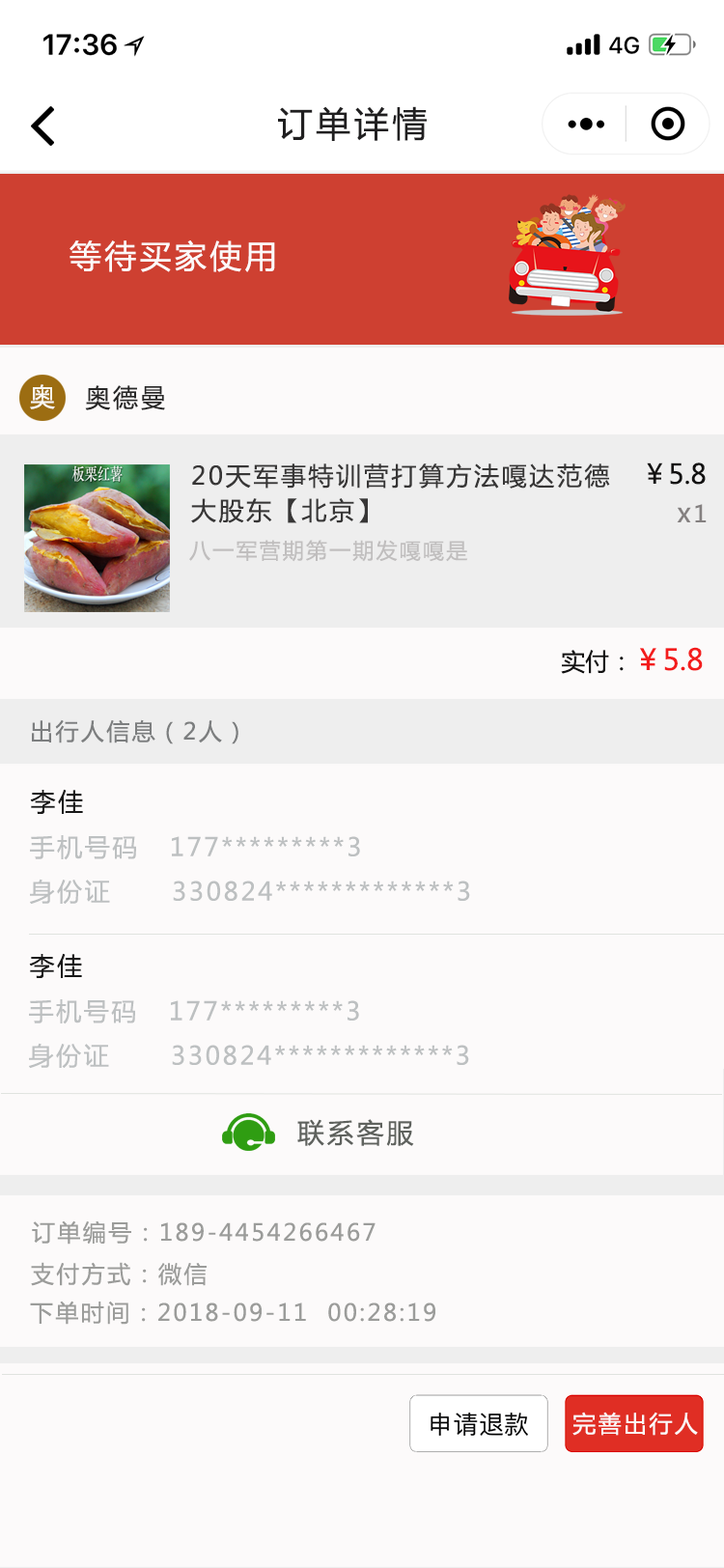
<style>
.page{position:relative;width:724px;height:1568px;background:#fcfafa}
.page>*{position:absolute;margin:0}
.t1{font:34.8px "MicrosoftYaHei";letter-spacing:0.1em;color:#201f20}
.t2{font:31.9px "MicrosoftYaHei";letter-spacing:0.1em;color:#fcf9f9}
.t3{font:25.1px "MicrosoftYaHei";letter-spacing:0.1em;color:#f9f7f2}
.t4{font:25.1px "MicrosoftYaHei";letter-spacing:0.1em;color:#282727}
.t5{font:25.1px/34.8px "MicrosoftYaHei";letter-spacing:0.1em;color:#373636}
.t6{font:27px "MicrosoftYaHei";color:#121111}
.t7{font:27px "MicrosoftYaHei";letter-spacing:0.1em;color:#848080}
.t8{font:23.2px "MicrosoftYaHei";letter-spacing:0.1em;color:#848080}
.t9{font:21.2px "MicrosoftYaHei";letter-spacing:0.1em;color:#c0bebe}
.t10{font:29px "MicrosoftYaHei";color:#f31c1c}
.t11{font:24.1px "MicrosoftYaHei";color:#121111}
.t12{font:23.2px "MicrosoftYaHei";letter-spacing:0.1em;color:#7c7e7f}
.t13{font:25.1px "MicrosoftYaHei";letter-spacing:0.1em;color:#181818}
.t14{font:25.1px "MicrosoftYaHei";letter-spacing:0.1em;color:#bdc0c1}
.t15{font:27px "MicrosoftYaHei";letter-spacing:0.1em;color:#5f625e}
.t16{font:23.2px "MicrosoftYaHei";letter-spacing:0.1em;color:#9b9c9a}
</style>
<div class="page">
<p class="t1" style="left:278px;top:106px;width:149px;height:35px">订单详情</p>
<p class="t2" style="left:70px;top:240px;width:205px;height:32px">等待买家使用</p>
<p class="t3" style="left:30px;top:384px;width:25px;height:25px">奥</p>
<p class="t4" style="left:85px;top:385px;width:80px;height:25px">奥德曼</p>
<p class="t5" style="left:191px;top:463px;width:419px;height:60px">20天军事特训营打算方法嘎达范德<br>大股东【北京】</p>
<p class="t6" style="left:647px;top:462px;width:59px;height:23px">￥5.8</p>
<p class="t7" style="left:677px;top:504px;width:30px;height:18px">x<span class="t8">1</span></p>
<p class="t9" style="left:189px;top:540px;width:279px;height:22px">八一军营期第一期发嘎嘎是</p>
<p class="t10" style="left:561px;top:647px;width:142px;height:27px"><span class="t11">实付：</span>￥5.8</p>
<p class="t12" style="left:32px;top:719px;width:206px;height:25px">出行人信息（2人）</p>
<p class="t13" style="left:30px;top:789px;width:53px;height:25px">李佳</p>
<p class="t14" style="left:30px;top:835px;width:330px;height:25px">手机号码   177*********3</p>
<p class="t14" style="left:30px;top:879px;width:440px;height:26px">身份证      330824*************3</p>
<p class="t13" style="left:29px;top:953px;width:53px;height:25px">李佳</p>
<p class="t14" style="left:29px;top:999px;width:330px;height:25px">手机号码   177*********3</p>
<p class="t14" style="left:29px;top:1043px;width:440px;height:26px">身份证      330824*************3</p>
<p class="t15" style="left:297px;top:1119px;width:117px;height:27px">联系客服</p>
<p class="t16" style="left:32px;top:1220px;width:344px;height:25px">订单编号：189-4454266467</p>
<p class="t16" style="left:31px;top:1262px;width:176px;height:24px">支付方式：微信</p>
<p class="t16" style="left:30px;top:1301px;width:405px;height:24px">下单时间：2018-09-11  00:28:19</p>
</div>
